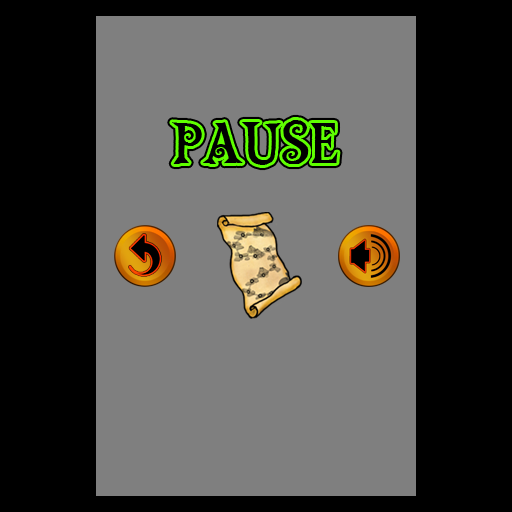
<style>
.page{position:relative;width:512px;height:512px;background:#7f7f7f}
.page>*{position:absolute;margin:0}
.t1{font:60px "LambadaLetPlain";color:#000000}
</style>
<div class="page">
<p class="t1" style="left:172px;top:120px;width:166px;height:45px">PAUSE</p>
</div>
